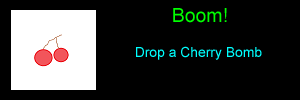
<style>
.page{position:relative;width:300px;height:100px;background:#000000}
.page>*{position:absolute;margin:0}
.t1{font:19.4px "ArialMT";color:#00ff00}
.t2{font:13.9px "ArialMT";color:#00ffff}
</style>
<div class="page">
<p class="t1" style="left:173px;top:8px;width:54px;height:15px">Boom!</p>
<p class="t2" style="left:136px;top:46px;width:126px;height:14px">Drop a Cherry Bomb</p>
</div>
